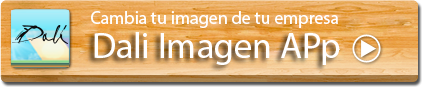
<style>
.page{position:relative;width:422px;height:87px}
.page>*{position:absolute;margin:0}
.t1{font:18px "MyriadPro-Regular";color:#ffffff}
.t2{font:36px "MyriadPro-Regular";color:#ffffff}
</style>
<div class="page">
<p class="t1" style="left:91px;top:11px;width:247px;height:17px">Cambia tu imagen de tu empresa</p>
<p class="t2" style="left:94px;top:32px;width:246px;height:33px">Dali Imagen APp</p>
</div>
